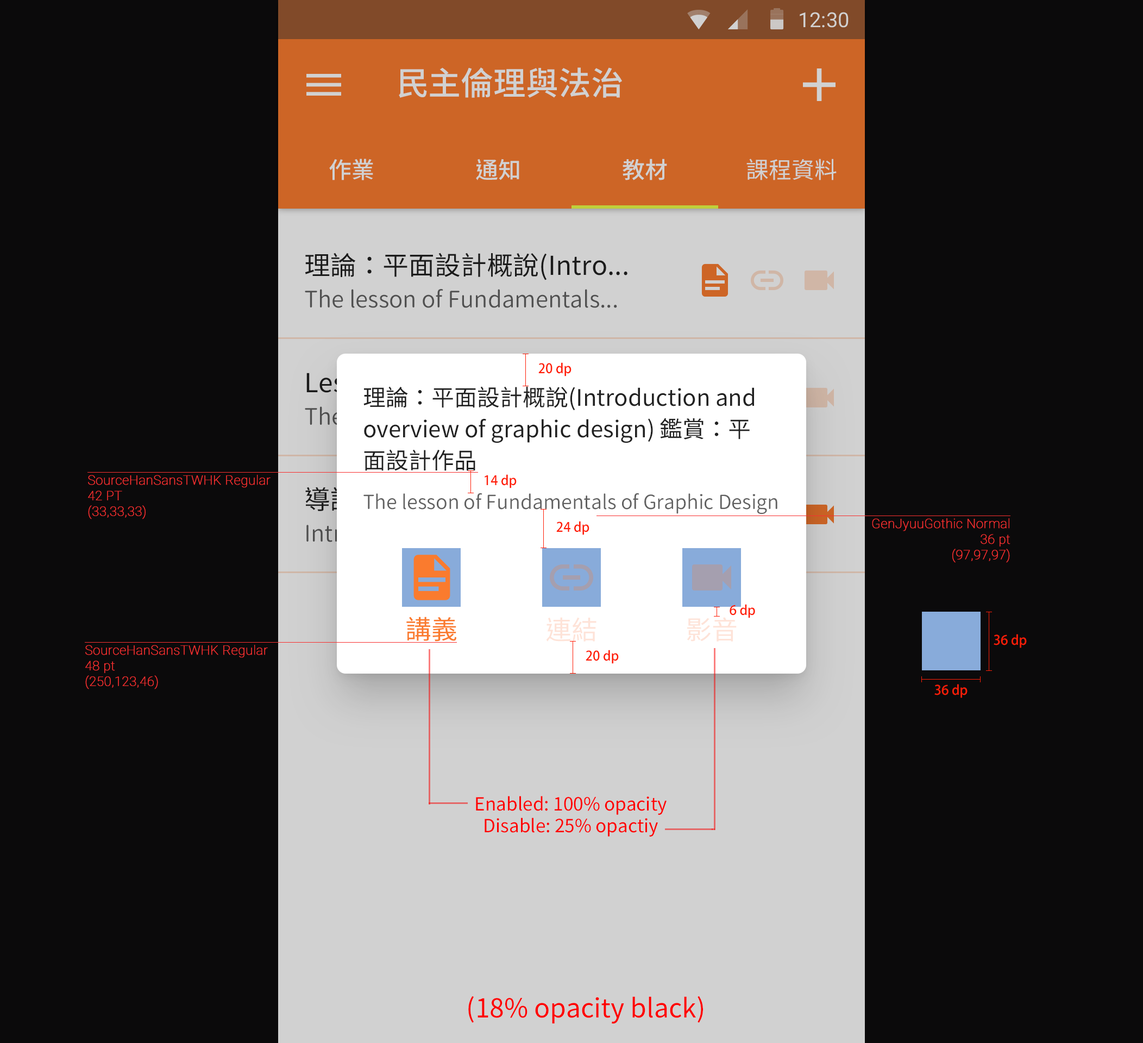
<style>
.page{position:relative;width:1143px;height:1043px;background:#0b0a0b}
.page>*{position:absolute;margin:0}
.t1{font:20.7px "Roboto-Regular";color:#d1d1d1}
.t2{font:32.6px "SourceHanSansTWHK-Medium";color:#d1d1d1}
.t3{font:22.8px "SourceHanSansTWHK-Medium";color:#d1d1d1}
.t4{font:22.8px "SourceHanSansTWHK-Regular";color:#d1d1d1}
.t5{font:26.1px "SourceHanSansTWHK-Regular";color:#212121}
.t6{font:22.8px "GenJyuuGothic-Normal";color:#616161}
.t7{font:13px "AdobeFanHeitiStd-Bold";color:#ff1e07}
.t8{font:22.8px/31.3px "SourceHanSansTWHK-Regular";color:#212121}
.t9{font:13px "Roboto-Thin";color:#f83030;font-weight:bold}
.t10{font:26.1px "SourceHanSansTWHK-Regular"}
.t11{font:19.6px "GenJyuuGothic-Normal";color:#616161}
.t12{font:22.8px "GenJyuuGothic-Normal"}
.t13{font:26.1px "SourceHanSansTWHK-Regular";color:#fa7b2e}
.t14{font:26.1px "SourceHanSansTWHK-Regular";color:#fee3d8}
.t15{font:18.1px/21.7px "SourceHanSansTWHK-Regular";color:#ff0000}
.t16{font:26.1px "SourceHanSansTWHK-Regular";color:#ff0000}
</style>
<div class="page">
<p class="t1" style="left:800px;top:12px;width:49px;height:16px">12:30</p>
<p class="t2" style="left:399px;top:67px;width:223px;height:31px">民主倫理與法治</p>
<p class="t3" style="left:329px;top:159px;width:44px;height:21px">作業</p>
<p class="t3" style="left:476px;top:159px;width:43px;height:21px">通知</p>
<p class="t3" style="left:623px;top:159px;width:44px;height:21px">教材</p>
<p class="t4" style="left:747px;top:159px;width:90px;height:21px">課程資料</p>
<p class="t5" style="left:305px;top:253px;width:323px;height:27px">理論：平面設計概說(Intro...</p>
<p class="t6" style="left:305px;top:289px;width:312px;height:19px">The lesson of Fundamentals...</p>
<p class="t7" style="left:538px;top:362px;width:34px;height:15px">20 dp</p>
<p class="t8" style="left:363px;top:386px;width:391px;height:85px">理論：平面設計概說(Introduction and <br>overview of graphic design) 鑑賞：平<br>面設計作品</p>
<p class="t9" style="left:88px;top:475px;width:183px;height:44px">SourceHanSansTWHK Regular<br>42 PT<br>(33,33,33)</p>
<p class="t7" style="left:485px;top:474px;width:32px;height:14px">14 dp</p>
<p class="t10" style="left:305px;top:487px;width:51px;height:24px">導論</p>
<p class="t11" style="left:363px;top:493px;width:414px;height:22px">The lesson of Fundamentals of Graphic Design</p>
<p class="t7" style="left:556px;top:521px;width:33px;height:14px">24 dp</p>
<p class="t9" style="left:872px;top:518px;width:139px;height:45px;text-align:right">GenJyuuGothic Normal<br>36 pt<br>(97,97,97)</p>
<p class="t12" style="left:306px;top:525px;width:48px;height:17px">Intro</p>
<p class="t7" style="left:730px;top:604px;width:25px;height:14px">6 dp</p>
<p class="t13" style="left:406px;top:617px;width:50px;height:25px">講義</p>
<p class="t14" style="left:546px;top:617px;width:51px;height:25px">連結</p>
<p class="t14" style="left:687px;top:617px;width:50px;height:25px">影音</p>
<p class="t7" style="left:994px;top:634px;width:33px;height:14px">36 dp</p>
<p class="t9" style="left:85px;top:645px;width:183px;height:44px">SourceHanSansTWHK Regular<br>48 pt<br>(250,123,46)</p>
<p class="t7" style="left:586px;top:650px;width:33px;height:14px">20 dp</p>
<p class="t7" style="left:934px;top:684px;width:34px;height:14px">36 dp</p>
<p class="t15" style="left:476px;top:796px;width:191px;height:41px;text-align:center">Enabled: 100% opacity<br>Disable: 25% opactiy</p>
<p class="t16" style="left:468px;top:996px;width:235px;height:28px">(18% opacity black)</p>
</div>
